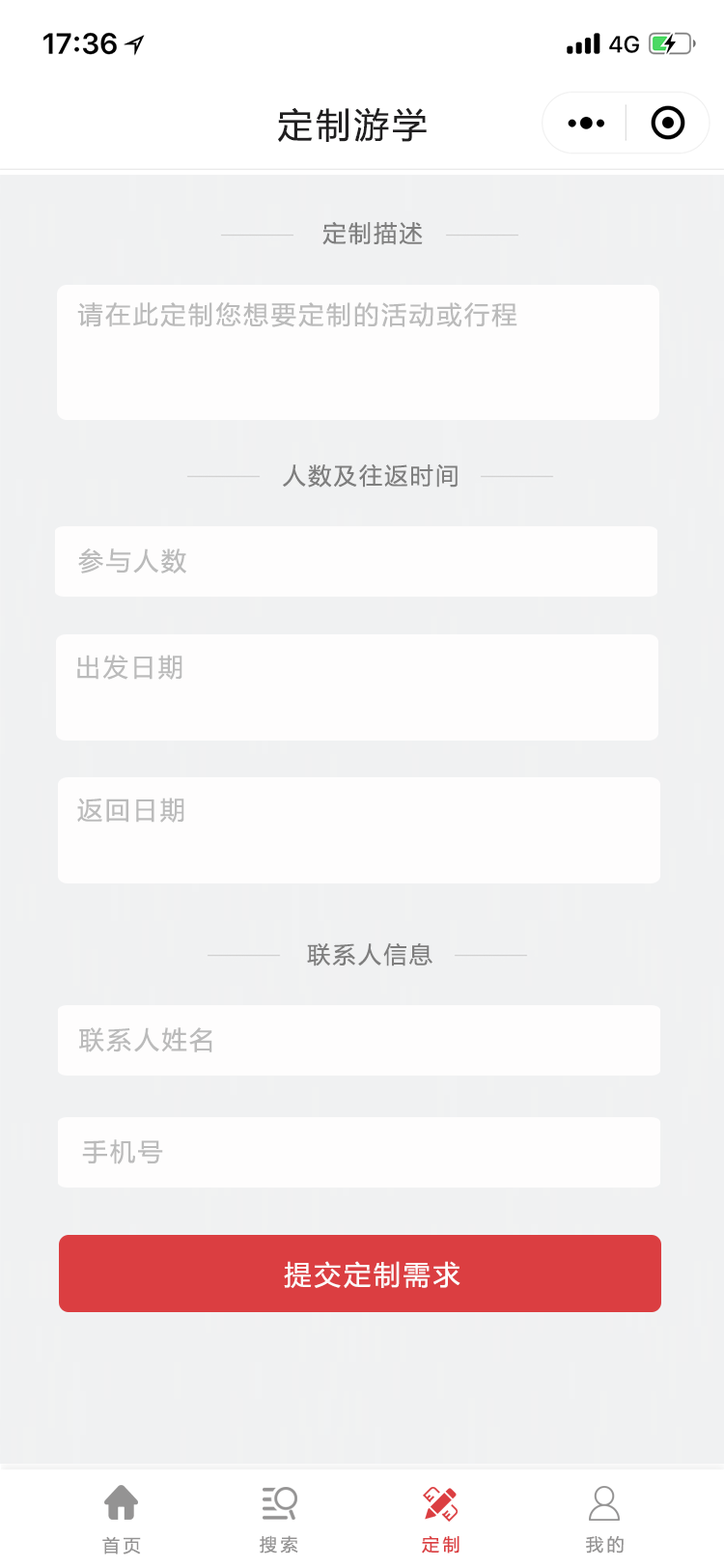
<style>
.page{position:relative;width:724px;height:1568px;background:#f0f1f2}
.page>*{position:absolute;margin:0}
.t1{font:34.8px "MicrosoftYaHei";letter-spacing:0.1em;color:#201f20}
.t2{font:23.2px "MicrosoftYaHei";letter-spacing:0.1em;color:#7e7e7e}
.t3{font:25.1px "MicrosoftYaHei";letter-spacing:0.1em;color:#bbbbbb}
.t4{font:27px "MicrosoftYaHei";letter-spacing:0.1em;color:#fcfafa}
.t5{font:17.4px "MicrosoftYaHei";letter-spacing:0.2em;color:#949393}
.t6{font:17.4px "MicrosoftYaHei";letter-spacing:0.2em;color:#db3e41}
</style>
<div class="page">
<p class="t1" style="left:278px;top:107px;width:149px;height:35px">定制游学</p>
<p class="t2" style="left:322px;top:221px;width:101px;height:24px">定制描述</p>
<p class="t3" style="left:77px;top:302px;width:441px;height:25px">请在此定制您想要定制的活动或行程</p>
<p class="t2" style="left:283px;top:463px;width:175px;height:25px">人数及往返时间</p>
<p class="t3" style="left:78px;top:548px;width:108px;height:26px">参与人数</p>
<p class="t3" style="left:77px;top:655px;width:105px;height:25px">出发日期</p>
<p class="t3" style="left:77px;top:798px;width:107px;height:25px">返回日期</p>
<p class="t2" style="left:307px;top:942px;width:126px;height:24px">联系人信息</p>
<p class="t3" style="left:79px;top:1027px;width:133px;height:25px">联系人姓名</p>
<p class="t3" style="left:82px;top:1139px;width:81px;height:25px">手机号</p>
<p class="t4" style="left:284px;top:1261px;width:177px;height:27px">提交定制需求</p>
<p class="t5" style="left:102px;top:1536px;width:39px;height:18px">首页</p>
<p class="t5" style="left:260px;top:1535px;width:38px;height:19px">搜索</p>
<p class="t6" style="left:422px;top:1535px;width:38px;height:19px">定制</p>
<p class="t5" style="left:586px;top:1536px;width:38px;height:18px">我的</p>
</div>
